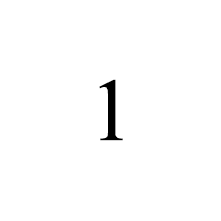
<style>
.page{position:relative;width:221px;height:221px;background:#ffffff}
.page>*{position:absolute;margin:0}
.t1{font:89.4px "TimesNewRomanPSMT";color:#000000}
</style>
<div class="page">
<p class="t1" style="left:99px;top:79px;width:24px;height:62px">1</p>
</div>
